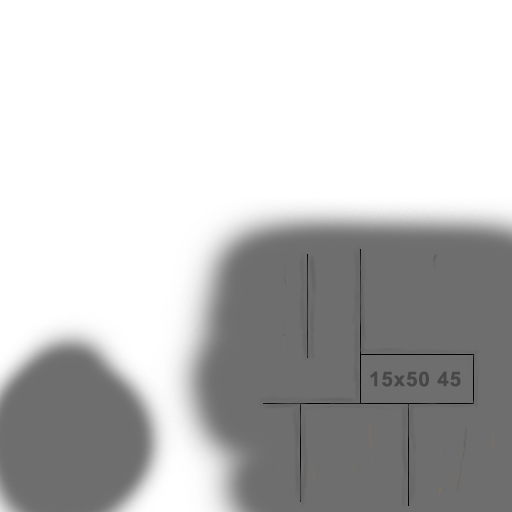
<style>
.page{position:relative;width:512px;height:512px;background:#ffffff}
.page>*{position:absolute;margin:0}
.t1{font:20.3px "Arial-BoldMT";letter-spacing:0.04em;color:#484747}
</style>
<div class="page">
<p class="t1" style="left:370px;top:371px;width:91px;height:16px">15x50 45</p>
</div>
